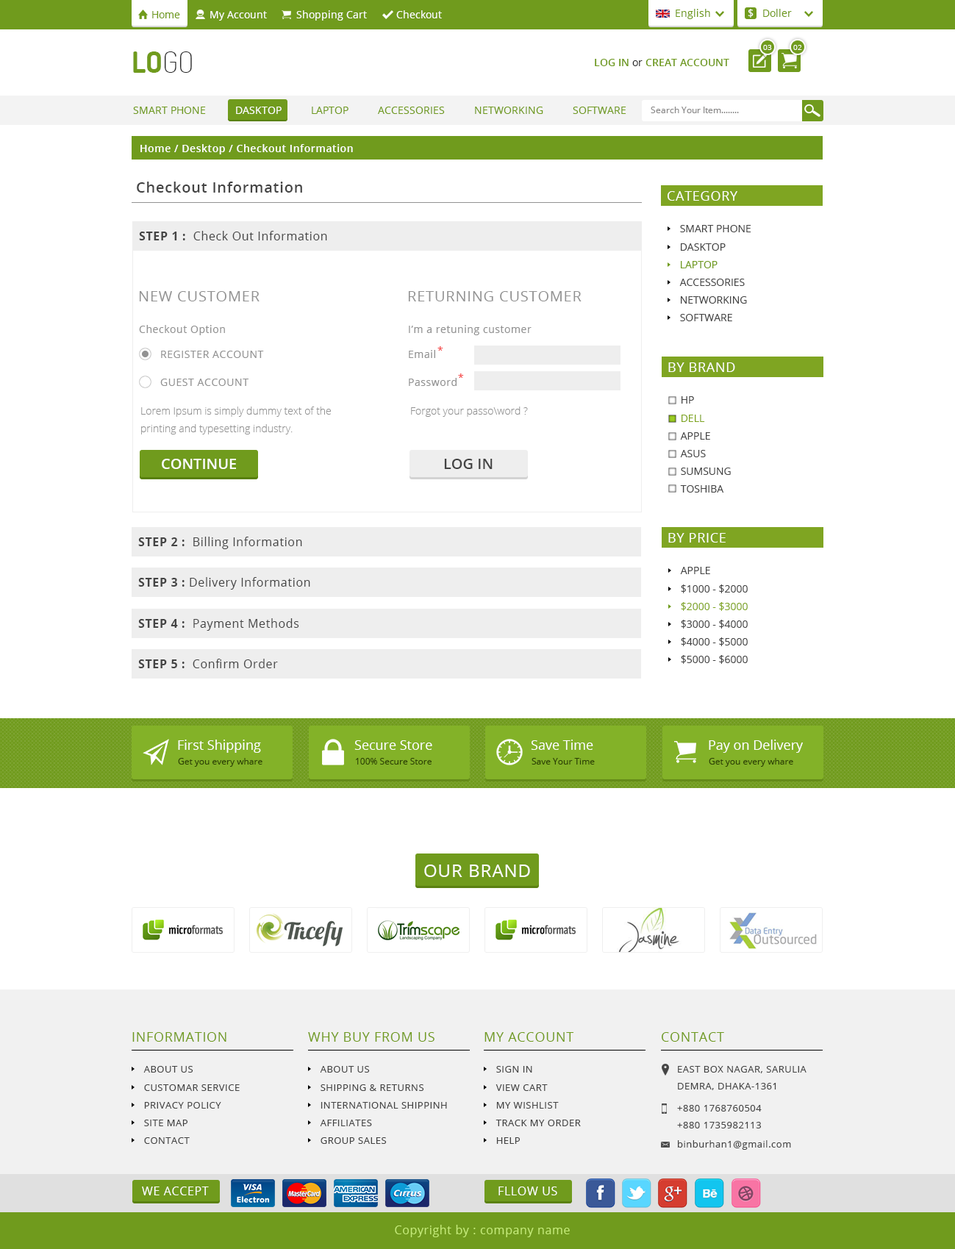
<style>
.page{position:relative;width:955px;height:1249px;background:#ffffff}
.page>*{position:absolute;margin:0}
.t1{font:10.3px "OpenSans";color:#ffffff}
.t2{font:10.3px "OpenSans";color:#709b1d}
.t3{font:29.4px "Dosis-Bold";color:#709b1d;text-transform:uppercase}
.t4{font:29.4px "Dosis-ExtraLight";color:#2b2b2b;text-transform:uppercase}
.t5{font:7.4px "OpenSans";color:#ffffff}
.t6{font:10.3px "OpenSans-Semibold";color:#709b1d;text-transform:uppercase}
.t7{font:10.3px "OpenSans";color:#2b2b2b}
.t8{font:10.3px "OpenSans";color:#709b1d;text-transform:uppercase}
.t9{font:10.3px "OpenSans";color:#ffffff;text-transform:uppercase}
.t10{font:8.8px "OpenSans";color:#898888}
.t11{font:10.3px "OpenSans-Semibold";letter-spacing:0.04em;color:#ffffff}
.t12{font:14.7px "OpenSans-Semibold";letter-spacing:0.04em;color:#444444}
.t13{font:13.2px "OpenSans";letter-spacing:0.04em;color:#ffffff;text-transform:uppercase}
.t14{font:11.8px "OpenSans";letter-spacing:0.04em;color:#444444}
.t15{font:11.8px "OpenSans-Bold";letter-spacing:0.04em;color:#444444}
.t16{font:10.3px "OpenSans";color:#444444;text-transform:uppercase}
.t17{font:14.7px "OpenSans";letter-spacing:0.04em;color:#929292}
.t18{font:10.3px "OpenSans";letter-spacing:0.04em;color:#929292}
.t19{font:10.3px "OpenSans";letter-spacing:0.04em;color:#f42f2f}
.t20{font:10.3px/17.6px "OpenSans-Light";color:#929292}
.t21{font:10.3px "OpenSans-Light";color:#929292}
.t22{font:10.3px "OpenSans";color:#7fa522;text-transform:uppercase}
.t23{font:14.7px "OpenSans-Semibold";color:#ffffff}
.t24{font:14.7px "OpenSans-Semibold";color:#444444}
.t25{font:13.2px "OpenSans";color:#ffffff}
.t26{font:8.8px "OpenSans";color:#2c4104}
.t27{font:17.6px "OpenSans";letter-spacing:0.04em;color:#ffffff}
.t28{font:13.2px "OpenSans";letter-spacing:0.04em;color:#709b1d}
.t29{font:9.6px "OpenSans";letter-spacing:0.04em;color:#444444}
.t30{font:9.6px/16.9px "OpenSans";letter-spacing:0.04em;color:#434343}
.t31{font:9.6px "OpenSans";letter-spacing:0.04em;color:#434343}
.t32{font:11.8px "OpenSans";letter-spacing:0.04em;color:#ffffff}
.t33{font:11.8px "OpenSans";letter-spacing:0.04em;color:#c5ec78}
</style>
<div class="page">
<p class="t1" style="left:152px;top:10px;width:290px;height:11px"><span class="t2">Home  </span>        My Account          Shopping Cart          Checkout</p>
<p class="t2" style="left:676px;top:9px;width:34px;height:10px">English</p>
<p class="t1" style="left:748px;top:9px;width:5px;height:9px">$</p>
<p class="t2" style="left:763px;top:9px;width:29px;height:8px">Doller</p>
<p class="t3" style="left:133px;top:51px;width:59px;height:22px">lo<span class="t4">go</span></p>
<p class="t5" style="left:763px;top:45px;width:9px;height:5px">03</p>
<p class="t5" style="left:793px;top:45px;width:9px;height:5px">02</p>
<p class="t6" style="left:595px;top:59px;width:134px;height:7px">LOG IN <span class="t7">or </span>Creat account</p>
<p class="t8" style="left:133px;top:107px;width:493px;height:7px">Smart Phone         <span class="t9"> dasktop</span>          laptop          accessories          networking          software</p>
<p class="t10" style="left:651px;top:107px;width:88px;height:6px">Search Your Item........</p>
<p class="t11" style="left:140px;top:144px;width:213px;height:10px">Home / Desktop / Checkout Information</p>
<p class="t12" style="left:137px;top:182px;width:165px;height:11px">Checkout Information</p>
<p class="t13" style="left:667px;top:191px;width:70px;height:10px">category</p>
<p class="t14" style="left:139px;top:231px;width:188px;height:9px"><span class="t15">STEP 1 :</span>  Check Out Information</p>
<p class="t16" style="left:680px;top:225px;width:71px;height:7px">Smart Phone</p>
<p class="t16" style="left:681px;top:243px;width:44px;height:8px">dasktop</p>
<p class="t8" style="left:681px;top:261px;width:36px;height:7px">laptop</p>
<p class="t16" style="left:679px;top:279px;width:66px;height:7px">accessories</p>
<p class="t17" style="left:139px;top:291px;width:120px;height:10px">NEW CUSTOMER</p>
<p class="t17" style="left:408px;top:291px;width:173px;height:10px">RETURNING CUSTOMER</p>
<p class="t16" style="left:681px;top:296px;width:66px;height:8px">networking</p>
<p class="t16" style="left:680px;top:314px;width:52px;height:7px">software</p>
<p class="t18" style="left:139px;top:325px;width:86px;height:10px">Checkout Option</p>
<p class="t18" style="left:409px;top:325px;width:122px;height:10px">I’m a retuning customer</p>
<p class="t18" style="left:161px;top:351px;width:103px;height:7px">REGISTER ACCOUNT</p>
<p class="t18" style="left:409px;top:350px;width:26px;height:8px">Email</p>
<p class="t19" style="left:437px;top:346px;width:6px;height:5px">*</p>
<p class="t13" style="left:668px;top:362px;width:67px;height:10px">by Brand</p>
<p class="t18" style="left:409px;top:378px;width:47px;height:8px">Password</p>
<p class="t19" style="left:458px;top:373px;width:6px;height:5px">*</p>
<p class="t18" style="left:160px;top:379px;width:88px;height:7px">GUEST ACCOUNT</p>
<p class="t16" style="left:681px;top:396px;width:13px;height:8px">HP</p>
<p class="t20" style="left:141px;top:406px;width:190px;height:28px">Lorem Ipsum is simply dummy text of the <br>printing and typesetting industry.</p>
<p class="t21" style="left:411px;top:406px;width:117px;height:11px">Forgot your passo\word ?</p>
<p class="t22" style="left:681px;top:415px;width:24px;height:7px">DELL</p>
<p class="t16" style="left:680px;top:432px;width:30px;height:8px">APPLE</p>
<p class="t16" style="left:680px;top:450px;width:26px;height:7px">ASUS</p>
<p class="t23" style="left:162px;top:459px;width:74px;height:10px">CONTINUE</p>
<p class="t24" style="left:444px;top:459px;width:48px;height:10px">LOG IN</p>
<p class="t16" style="left:681px;top:467px;width:50px;height:8px">SUMSUNG</p>
<p class="t16" style="left:680px;top:485px;width:44px;height:7px">TOSHIBA</p>
<p class="t13" style="left:668px;top:533px;width:57px;height:9px">by price</p>
<p class="t14" style="left:138px;top:537px;width:164px;height:12px"><span class="t15">STEP 2 :</span>  Billing Information</p>
<p class="t16" style="left:680px;top:567px;width:30px;height:7px">apple</p>
<p class="t14" style="left:138px;top:577px;width:172px;height:13px"><span class="t15">STEP 3 :</span> Delivery Information</p>
<p class="t16" style="left:681px;top:584px;width:67px;height:9px">$1000 - $2000</p>
<p class="t22" style="left:681px;top:602px;width:67px;height:9px">$2000 - $3000</p>
<p class="t14" style="left:138px;top:618px;width:161px;height:13px"><span class="t15">STEP 4 :</span>  Payment Methods</p>
<p class="t16" style="left:681px;top:620px;width:67px;height:8px">$3000 - $4000</p>
<p class="t16" style="left:681px;top:637px;width:67px;height:9px">$4000 - $5000</p>
<p class="t14" style="left:138px;top:659px;width:140px;height:9px"><span class="t15">STEP 5 :</span>  Confirm Order</p>
<p class="t16" style="left:681px;top:655px;width:67px;height:9px">$5000 - $6000</p>
<p class="t25" style="left:178px;top:739px;width:83px;height:14px">First Shipping</p>
<p class="t25" style="left:354px;top:740px;width:78px;height:10px">Secure Store</p>
<p class="t25" style="left:531px;top:739px;width:62px;height:11px">Save Time</p>
<p class="t25" style="left:709px;top:739px;width:94px;height:14px">Pay on Delivery</p>
<p class="t26" style="left:178px;top:758px;width:84px;height:9px">Get you every whare</p>
<p class="t26" style="left:356px;top:758px;width:75px;height:6px">100% Secure Store</p>
<p class="t26" style="left:531px;top:758px;width:64px;height:6px">Save Your Time</p>
<p class="t26" style="left:709px;top:758px;width:84px;height:9px">Get you every whare</p>
<p class="t27" style="left:424px;top:864px;width:106px;height:13px">OUR BRAND</p>
<p class="t28" style="left:132px;top:1032px;width:94px;height:10px">INFORMATION</p>
<p class="t28" style="left:308px;top:1032px;width:126px;height:10px">WHY BUY FROM US</p>
<p class="t28" style="left:484px;top:1032px;width:90px;height:10px">MY ACCOUNT</p>
<p class="t28" style="left:662px;top:1032px;width:62px;height:10px">CONTACT</p>
<p class="t29" style="left:143px;top:1066px;width:50px;height:6px">ABOUT US</p>
<p class="t29" style="left:320px;top:1066px;width:50px;height:6px">ABOUT US</p>
<p class="t29" style="left:496px;top:1066px;width:36px;height:6px">SIGN IN</p>
<p class="t30" style="left:678px;top:1066px;width:128px;height:24px">EAST BOX NAGAR, SARULIA<br>DEMRA, DHAKA-1361</p>
<p class="t31" style="left:144px;top:1084px;width:96px;height:7px">CUSTOMAR SERVICE</p>
<p class="t31" style="left:320px;top:1084px;width:104px;height:7px">SHIPPING &amp; RETURNS</p>
<p class="t31" style="left:495px;top:1084px;width:53px;height:7px">VIEW CART</p>
<p class="t29" style="left:144px;top:1102px;width:77px;height:6px">PRIVACY POLICY</p>
<p class="t29" style="left:320px;top:1102px;width:127px;height:6px">INTERNATIONAL SHIPPINH</p>
<p class="t29" style="left:496px;top:1102px;width:63px;height:6px">MY WISHLIST</p>
<p class="t30" style="left:677px;top:1105px;width:85px;height:23px">+880 1768760504<br>+880 1735982113</p>
<p class="t31" style="left:144px;top:1119px;width:43px;height:7px">SITE MAP</p>
<p class="t31" style="left:320px;top:1119px;width:52px;height:7px">AFFILIATES</p>
<p class="t31" style="left:495px;top:1119px;width:86px;height:7px">TRACK MY ORDER</p>
<p class="t31" style="left:144px;top:1137px;width:46px;height:7px">CONTACT</p>
<p class="t31" style="left:320px;top:1137px;width:67px;height:7px">GROUP SALES</p>
<p class="t31" style="left:496px;top:1137px;width:24px;height:7px">HELP</p>
<p class="t31" style="left:678px;top:1140px;width:113px;height:10px">binburhan1@gmail.com</p>
<p class="t32" style="left:142px;top:1186px;width:67px;height:9px">WE ACCEPT</p>
<p class="t32" style="left:498px;top:1186px;width:59px;height:9px">FLLOW US</p>
<p class="t33" style="left:395px;top:1225px;width:175px;height:12px">Copyright by : company name</p>
</div>
